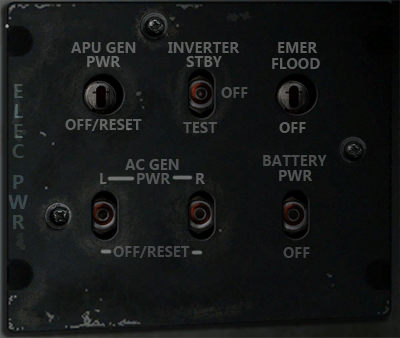
<style>
.page{position:relative;width:400px;height:338px}
.page>*{position:absolute;margin:0}
.t1{font:15px "SegoeUI-Bold";color:#606262}
.t2{font:15px "SegoeUI-Bold";color:#5e5f5e}
.t3{font:15px "SegoeUI-Bold";color:#5e6060}
.t4{font:15px "SegoeUI-Bold";color:#686b69}
.t5{font:15px "SegoeUI-Bold";color:#616261}
.t6{font:15px "SegoeUI-Bold";color:#5a5c5c}
.t7{font:20px "SegoeUI-Bold";color:#37484a}
.t8{font:15px "SegoeUI-Bold";color:#4b4d4b}
.t9{font:15px "SegoeUI-Bold";color:#5f6161}
.t10{font:15px "SegoeUI-Bold";color:#545654}
.t11{font:15px "SegoeUI-Bold";color:#5d5e5e}
.t12{font:15px "SegoeUI-Bold";color:#545757}
.t13{font:15px "SegoeUI-Bold";color:#494b4c}
.t14{font:15px "SegoeUI-Bold";color:#646564}
.t15{font:15px "SegoeUI-Bold";color:#5d5e5d}
.t16{font:15px "SegoeUI-Bold";color:#525354}
.t17{font:15px "SegoeUI-Bold";color:#484a4b}
.t18{font:15px "SegoeUI-Bold";color:#434446}
</style>
<div class="page">
<p class="t1" style="left:71px;top:42px;width:65px;height:11px">APU GEN</p>
<p class="t2" style="left:168px;top:42px;width:72px;height:11px">INVERTER</p>
<p class="t3" style="left:278px;top:42px;width:40px;height:11px">EMER</p>
<p class="t4" style="left:87px;top:56px;width:34px;height:11px">PWR</p>
<p class="t5" style="left:186px;top:56px;width:36px;height:11px">STBY</p>
<p class="t6" style="left:272px;top:58px;width:48px;height:11px">FLOOD</p>
<p class="t7" style="left:8px;top:84px;width:20px;height:145px">ELEC  PWR</p>
<p class="t8" style="left:221px;top:87px;width:27px;height:11px">OFF</p>
<p class="t9" style="left:65px;top:119px;width:77px;height:12px">OFF/RESET</p>
<p class="t10" style="left:183px;top:122px;width:34px;height:11px">TEST</p>
<p class="t11" style="left:279px;top:122px;width:27px;height:11px">OFF</p>
<p class="t12" style="left:125px;top:159px;width:54px;height:11px">AC GEN</p>
<p class="t13" style="left:263px;top:155px;width:64px;height:11px">BATTERY</p>
<p class="t14" style="left:100px;top:173px;width:7px;height:11px">L</p>
<p class="t12" style="left:137px;top:173px;width:34px;height:11px">PWR</p>
<p class="t15" style="left:196px;top:173px;width:9px;height:11px">R</p>
<p class="t16" style="left:279px;top:170px;width:34px;height:11px">PWR</p>
<p class="t17" style="left:113px;top:246px;width:77px;height:12px">OFF/RESET</p>
<p class="t18" style="left:283px;top:247px;width:27px;height:11px">OFF</p>
</div>
